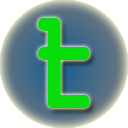
<style>
.page{position:relative;width:128px;height:128px}
.page>*{position:absolute;margin:0}
.t1{font:120px "PowderworksBRK";color:#08dc0d}
</style>
<div class="page">
<p class="t1" style="left:38px;top:18px;width:52px;height:90px">T</p>
</div>
